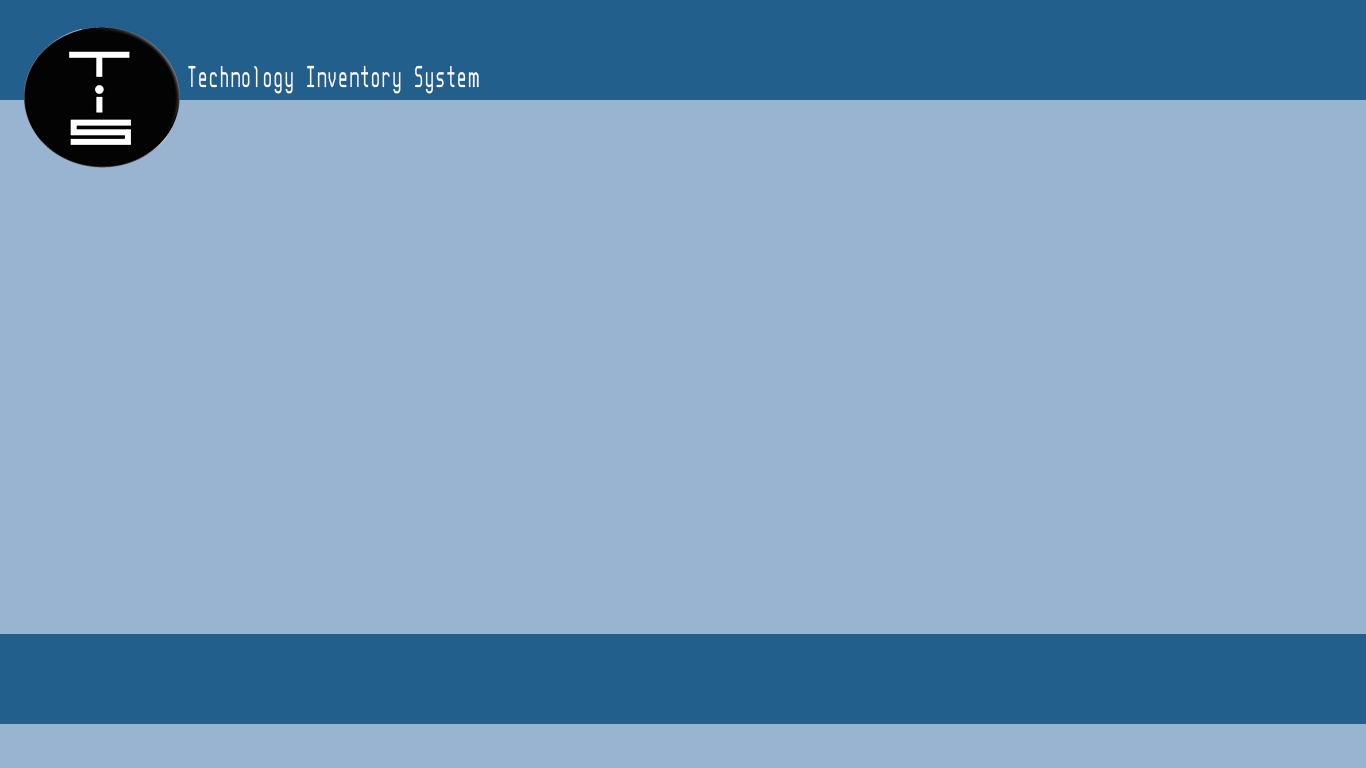
<style>
.page{position:relative;width:1366px;height:768px;background:#99b4d1}
.page>*{position:absolute;margin:0}
.t1{font:33.5px "Kernel-Panic-NBP";color:#ffffff;scale:0.64 1}
</style>
<div class="page">
<p class="t1" style="left:188px;top:65px;width:291px;height:29px">Technology Inventory System</p>
</div>
